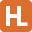
<style>
.page{position:relative;width:32px;height:32px;background:#dc6e2d}
.page>*{position:absolute;margin:0}
.t1{font:26px "AntiqueOliveStd-Bold";color:#ffffff}
</style>
<div class="page">
<p class="t1" style="left:6px;top:6px;width:15px;height:20px">H</p>
<p class="t1" style="left:17px;top:6px;width:11px;height:20px">L</p>
</div>
